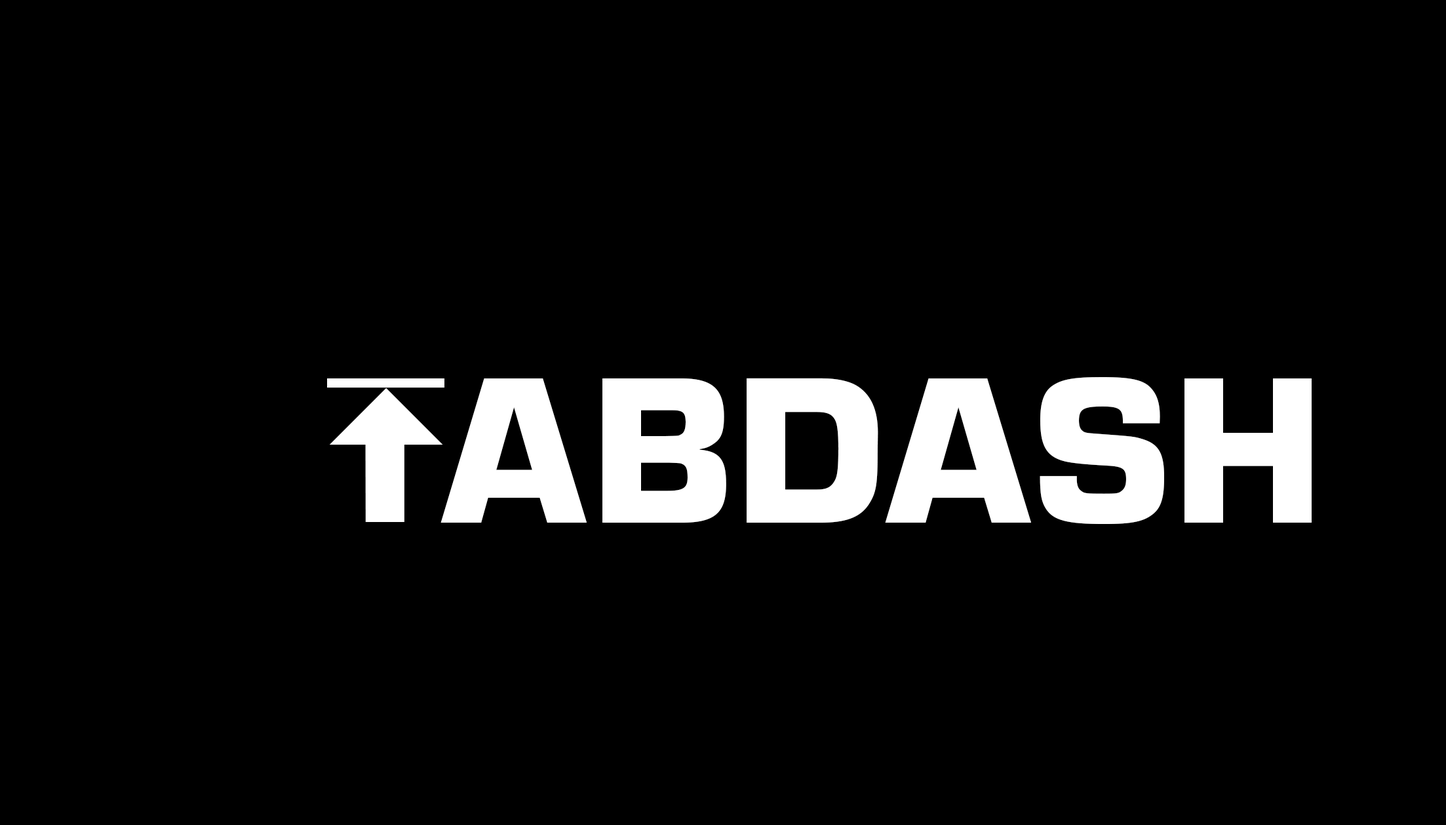
<style>
.page{position:relative;width:1446px;height:825px;background:#000000}
.page>*{position:absolute;margin:0}
.t1{font:216.2px "Eurostile-Bla";letter-spacing:0.025em;color:#ffffff}
.t2{font:216.2px "Eurostile-Bla";letter-spacing:0.025em;color:#000000}
</style>
<div class="page">
<p class="t1" style="left:308px;top:377px;width:1004px;height:147px"><span class="t2">T</span>ABDASH</p>
</div>
